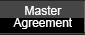
<style>
.page{position:relative;width:85px;height:35px;background:#000000}
.page>*{position:absolute;margin:0}
.t1{font:12px/12px "ArialMT";color:#ffffff}
</style>
<div class="page">
<p class="t1" style="left:13px;top:6px;width:59px;height:23px;text-align:center">Master<br>Agreement</p>
</div>
